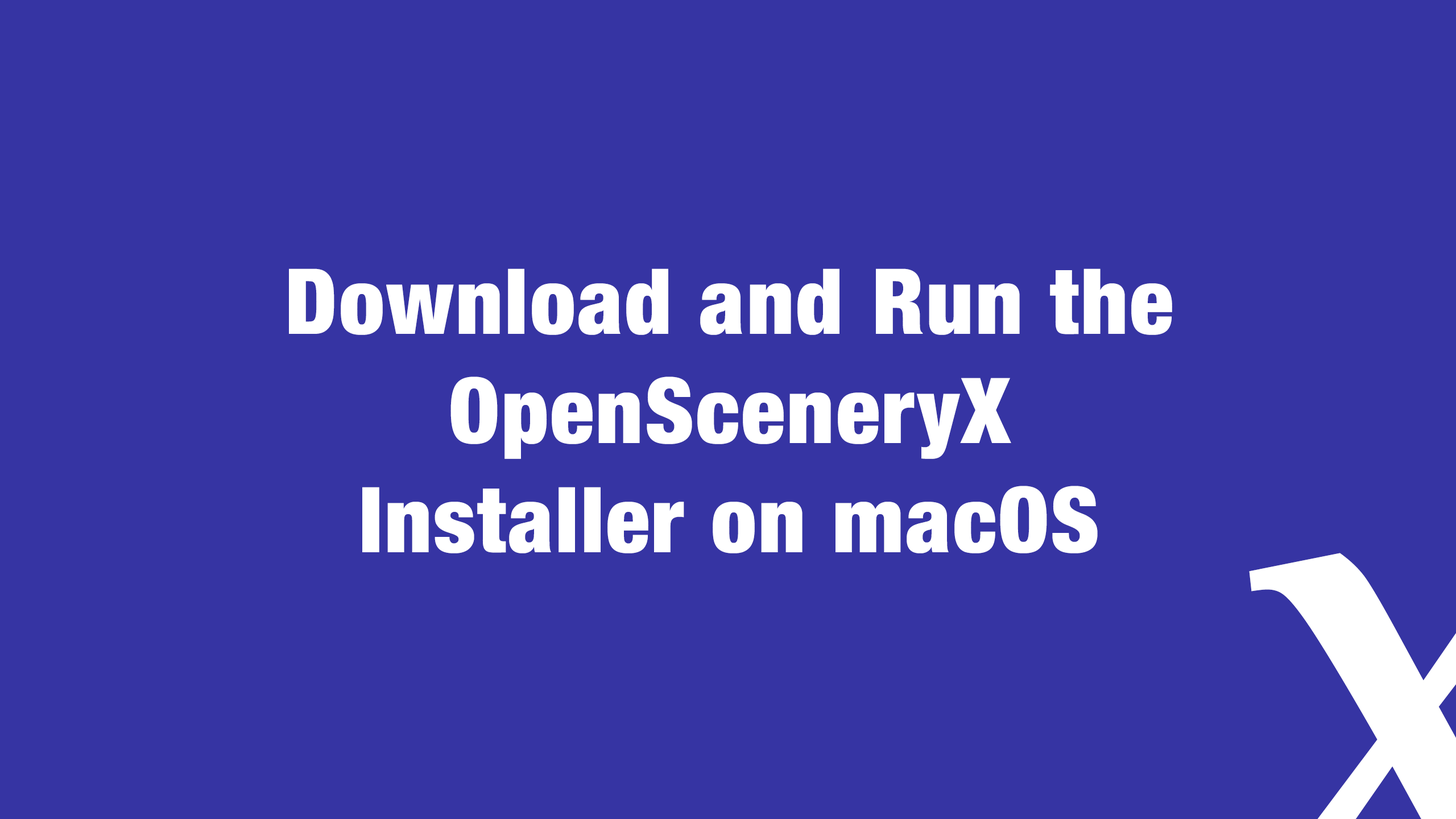
<style>
.page{position:relative;width:1456px;height:819px;background:#3634a3}
.page>*{position:absolute;margin:0}
.t1{font:91px "HelveticaNeue-CondensedBlack";letter-spacing:0.02em;color:#ffffff}
</style>
<div class="page">
<p class="t1" style="left:289px;top:268px;width:883px;height:285px;text-align:center">Download and Run the<br>OpenSceneryX<br>Installer on macOS</p>
</div>
